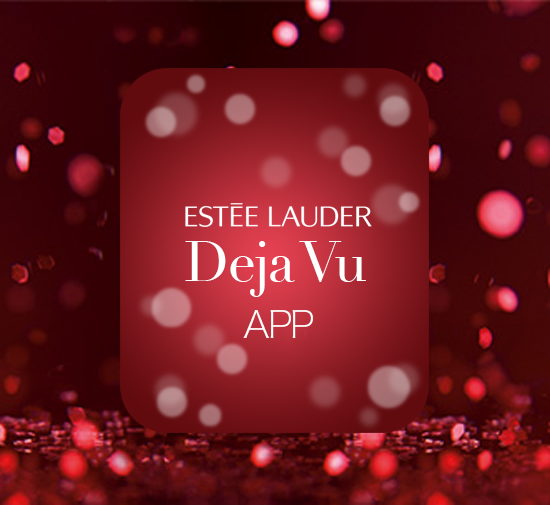
<style>
.page{position:relative;width:550px;height:505px}
.page>*{position:absolute;margin:0}
.t1{font:56px "Didot";letter-spacing:-0.04em;color:#ffffff}
.t2{font:37px "HiraginoSans-W1";letter-spacing:-0.04em;color:#ffffff}
</style>
<div class="page">
<p class="t1" style="left:185px;top:241px;width:181px;height:56px">Deja Vu</p>
<p class="t2" style="left:243px;top:310px;width:70px;height:28px">APP</p>
</div>
